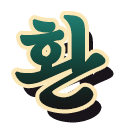
<style>
.page{position:relative;width:128px;height:128px;background:#ffffff}
.page>*{position:absolute;margin:0}
.t1{font:101.5px "SolmoeKimDaeGeonM";letter-spacing:0.08em;font-weight:bold}
</style>
<div class="page">
<p class="t1" style="left:15px;top:15px;width:91px;height:95px">환</p>
</div>
